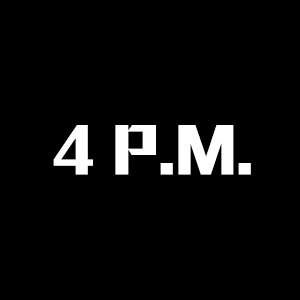
<style>
.page{position:relative;width:300px;height:300px;background:#000000}
.page>*{position:absolute;margin:0}
.t1{font:65px "MStiffHeiHKS-UltraBold";color:#ffffff}
</style>
<div class="page">
<p class="t1" style="left:53px;top:125px;width:198px;height:50px">4 P.M.</p>
</div>
